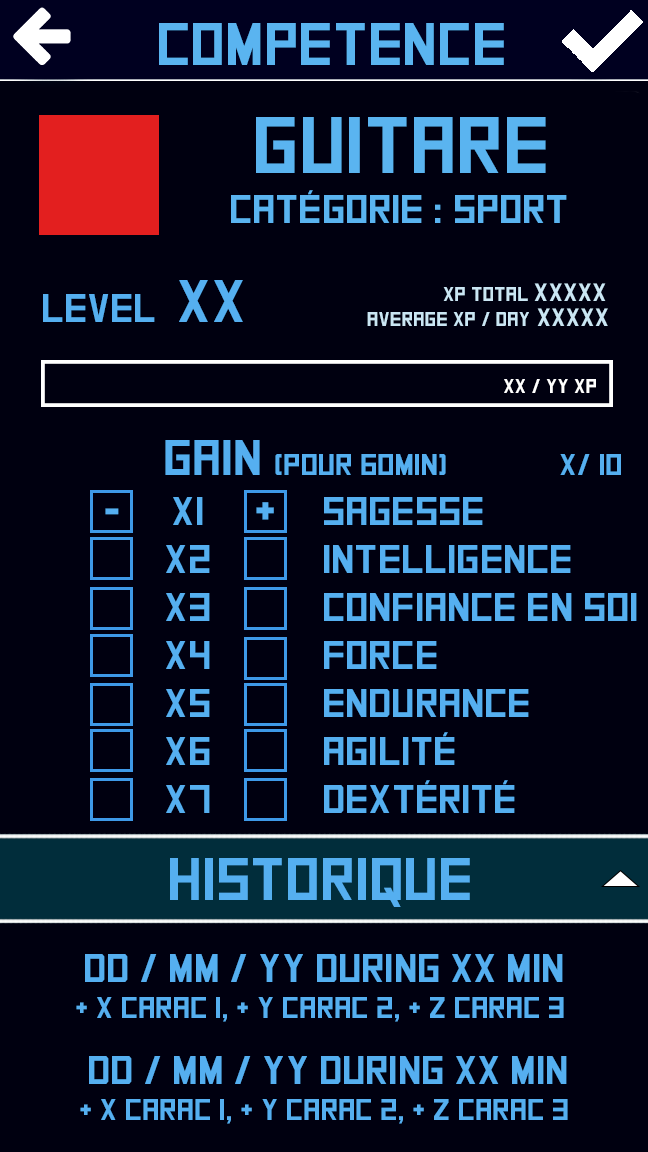
<style>
.page{position:relative;width:648px;height:1152px;background:#000010}
.page>*{position:absolute;margin:0}
.t1{font:60px "SquareFont";color:#5ab4f0}
.t2{font:80px "SquareFont";color:#5ab4f0}
.t3{font:40px "SquareFont";color:#5ab4f0}
.t4{font:40px "SquareFont";color:#55aff0}
.t5{font:60px "SquareFont";color:#55aff0}
.t6{font:20px "SquareFont";color:#cae6f4}
.t7{font:25px "SquareFont";color:#cae6f4}
.t8{font:20px "SquareFont";color:#ffffff}
.t9{font:30px "SquareFont";color:#55aff0}
.t10{font:50px "SquareFont";color:#55aff0}
</style>
<div class="page">
<p class="t1" style="left:159px;top:23px;width:345px;height:42px">Competence</p>
<p class="t2" style="left:256px;top:117px;width:290px;height:56px">Guitare</p>
<p class="t3" style="left:231px;top:190px;width:336px;height:33px">catégorie : sport</p>
<p class="t4" style="left:43px;top:280px;width:200px;height:42px">level  <span class="t5">XX</span></p>
<p class="t6" style="left:443px;top:283px;width:163px;height:18px">xp total <span class="t7">XXXXX</span></p>
<p class="t6" style="left:367px;top:308px;width:241px;height:18px">Average xp / day<span class="t7"> XXXXX</span></p>
<p class="t8" style="left:504px;top:379px;width:92px;height:14px">XX / YY xP</p>
<p class="t9" style="left:165px;top:440px;width:456px;height:35px"><span class="t10">     Gain </span>(pour 60min)    X/ 10</p>
<p class="t4" style="left:166px;top:497px;width:44px;height:316px;text-align:center">X1<br>X2<br>X3<br>X4<br>X5<br>X6<br>X7</p>
<p class="t4" style="left:324px;top:497px;width:313px;height:316px">Sagesse<br>Intelligence<br>Confiance en soi<br>force<br>endurance<br>agilité<br>dextérité</p>
<p class="t10" style="left:105px;top:508px;width:14px;height:7px">-</p>
<p class="t10" style="left:256px;top:502px;width:18px;height:18px">+</p>
<p class="t5" style="left:170px;top:858px;width:300px;height:49px">Historique</p>
<p class="t9" style="left:76px;top:954px;width:488px;height:68px;text-align:center"><span class="t4">DD / MM / YY during XX min<br></span>+ X carac 1, + Y carac 2, + Z carac 3</p>
<p class="t9" style="left:80px;top:1056px;width:488px;height:68px;text-align:center"><span class="t4">DD / MM / YY during XX min<br></span>+ X carac 1, + Y carac 2, + Z carac 3</p>
</div>
